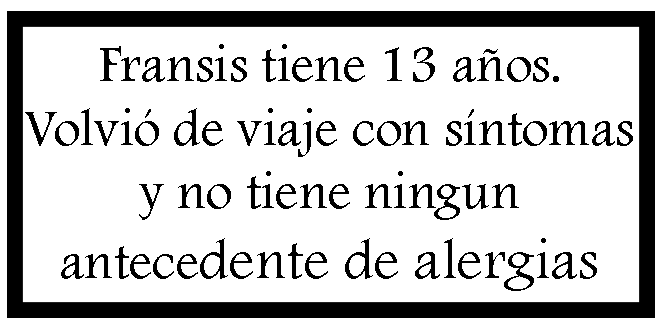
<style>
.page{position:relative;width:669px;height:330px;background:#ffffff}
.page>*{position:absolute;margin:0}
.t1{font:52.9px "FootlightMTLight";color:#000000}
.t2{font:58.2px "FootlightMTLight";color:#000000}
</style>
<div class="page">
<p class="t1" style="left:25px;top:44px;width:608px;height:247px;text-align:center">Fransis tiene 13 años. <br>Volvió de viaje con síntomas<br>y no tiene ningun <br>antece<span class="t2">dente de alergias</span></p>
</div>
